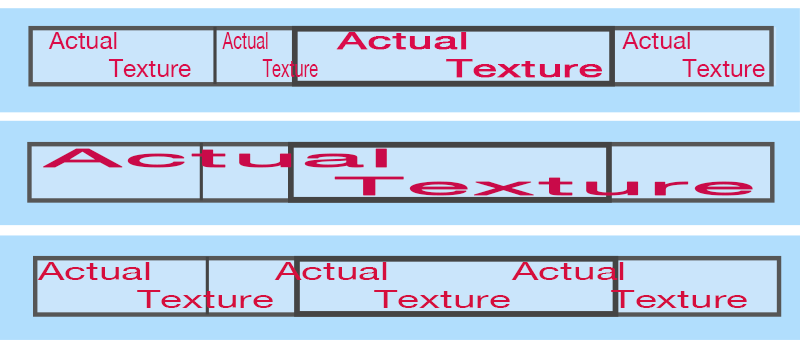
<style>
.page{position:relative;width:800px;height:350px;background:#b1defd}
.page>*{position:absolute;margin:0}
.t1{font:24.5px "HelveticaNeue";color:#da0b4a}
.t2{font:24.5px "HelveticaNeue";color:#da0b4a;scale:0.67 1}
.t3{font:24.5px "HelveticaNeue";color:#da0b4a;font-weight:bold;scale:1.81 1}
.t4{font:24.6px "HelveticaNeue";color:#c90a49;font-weight:bold;scale:4.85 1}
.t5{font:24.6px "HelveticaNeue";color:#d50e3d;scale:1.65 1}
</style>
<div class="page">
<p class="t1" style="left:48px;top:32px;width:69px;height:17px">Actual</p>
<p class="t2" style="left:222px;top:32px;width:46px;height:17px">Actual</p>
<p class="t3" style="left:336px;top:32px;width:131px;height:18px">Actual</p>
<p class="t1" style="left:622px;top:32px;width:68px;height:17px">Actual</p>
<p class="t1" style="left:108px;top:59px;width:83px;height:18px">Texture</p>
<p class="t2" style="left:262px;top:59px;width:56px;height:18px">Texture</p>
<p class="t3" style="left:446px;top:59px;width:156px;height:19px">Texture</p>
<p class="t1" style="left:682px;top:59px;width:83px;height:18px">Texture</p>
<p class="t4" style="left:43px;top:148px;width:344px;height:20px">Actual</p>
<p class="t4" style="left:334px;top:176px;width:419px;height:20px">Texture</p>
<p class="t5" style="left:37px;top:262px;width:113px;height:18px">Actual</p>
<p class="t5" style="left:274px;top:262px;width:113px;height:18px">Actual</p>
<p class="t5" style="left:511px;top:262px;width:113px;height:18px">Actual</p>
<p class="t5" style="left:137px;top:290px;width:136px;height:18px">Texture</p>
<p class="t5" style="left:374px;top:290px;width:136px;height:18px">Texture</p>
<p class="t5" style="left:611px;top:290px;width:136px;height:18px">Texture</p>
</div>
